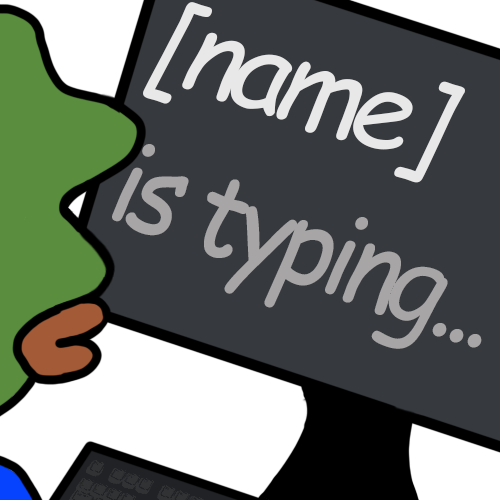
<style>
.page{position:relative;width:500px;height:500px;background:#363a3e}
.page>*{position:absolute;margin:0}
.t1{font:111px "ComicSansMS-Italic";letter-spacing:-0.074em;color:#e8e8e8}
.t2{font:114.7px "ComicSansMS-Italic";letter-spacing:-0.074em;color:#a7a5a5;scale:0.92 1}
.t3{font:123.3px "ComicSansMS-Italic";letter-spacing:-0.074em;color:#e8e8e8;scale:0.92 1}
</style>
<div class="page">
<p class="t1" style="left:143px;top:2px;width:322px;height:181px;rotate:17deg">[name]</p>
<p class="t2" style="left:112px;top:144px;width:370px;height:205px;rotate:19deg"><span class="t3"><br></span>is typing...</p>
</div>
